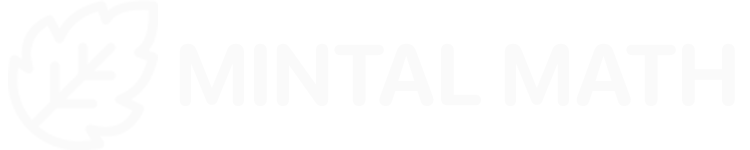
<style>
.page{position:relative;width:750px;height:150px;background:#ffffff}
.page>*{position:absolute;margin:0}
.t1{font:86px "SFProRounded-Bold";color:#fafafa}
</style>
<div class="page">
<p class="t1" style="left:179px;top:43px;width:556px;height:63px">MINTAL MATH</p>
</div>
